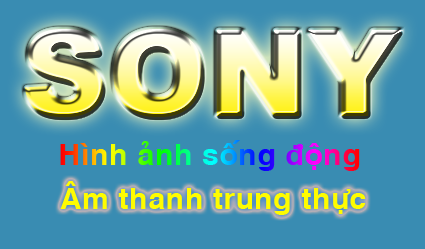
<style>
.page{position:relative;width:425px;height:249px;background:#398cb2}
.page>*{position:absolute;margin:0}
.t1{font:30px "VNI-Helve-Bold"}
.t2{font:30px "VNI-Helve-Bold";color:#fffc00}
</style>
<div class="page">
<p class="t1" style="left:60px;top:140px;width:300px;height:31px">Hình aûnh soáng ñoäng</p>
<p class="t2" style="left:60px;top:181px;width:306px;height:34px">AÂm thanh trung thöïc</p>
</div>
